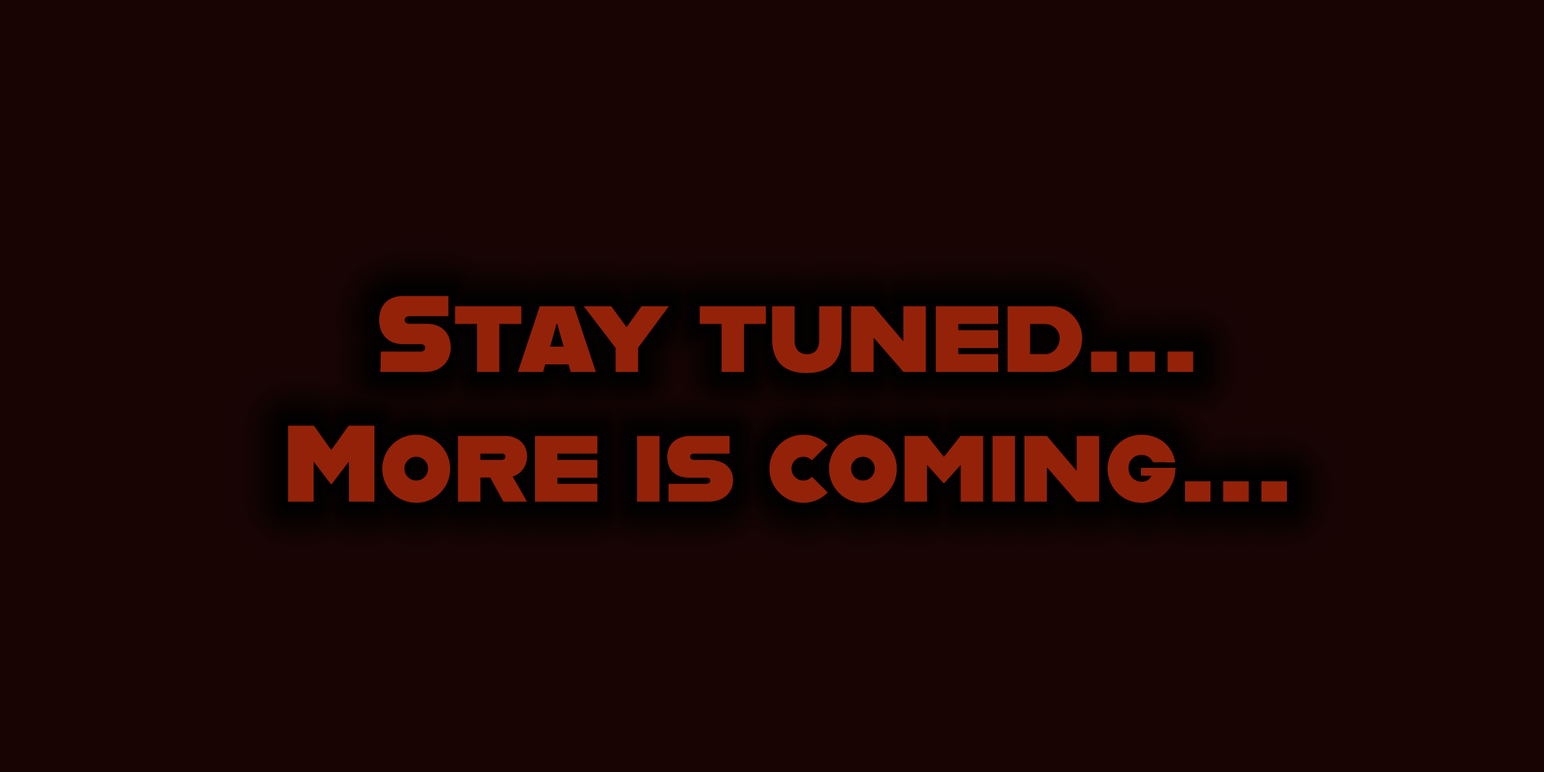
<style>
.page{position:relative;width:1544px;height:772px;background:#190404}
.page>*{position:absolute;margin:0}
.t1{font:108.1px "Alfarn";color:#942209}
</style>
<div class="page">
<p class="t1" style="left:288px;top:296px;width:999px;height:207px;text-align:center">Stay tuned...<br>More is coming...</p>
</div>
